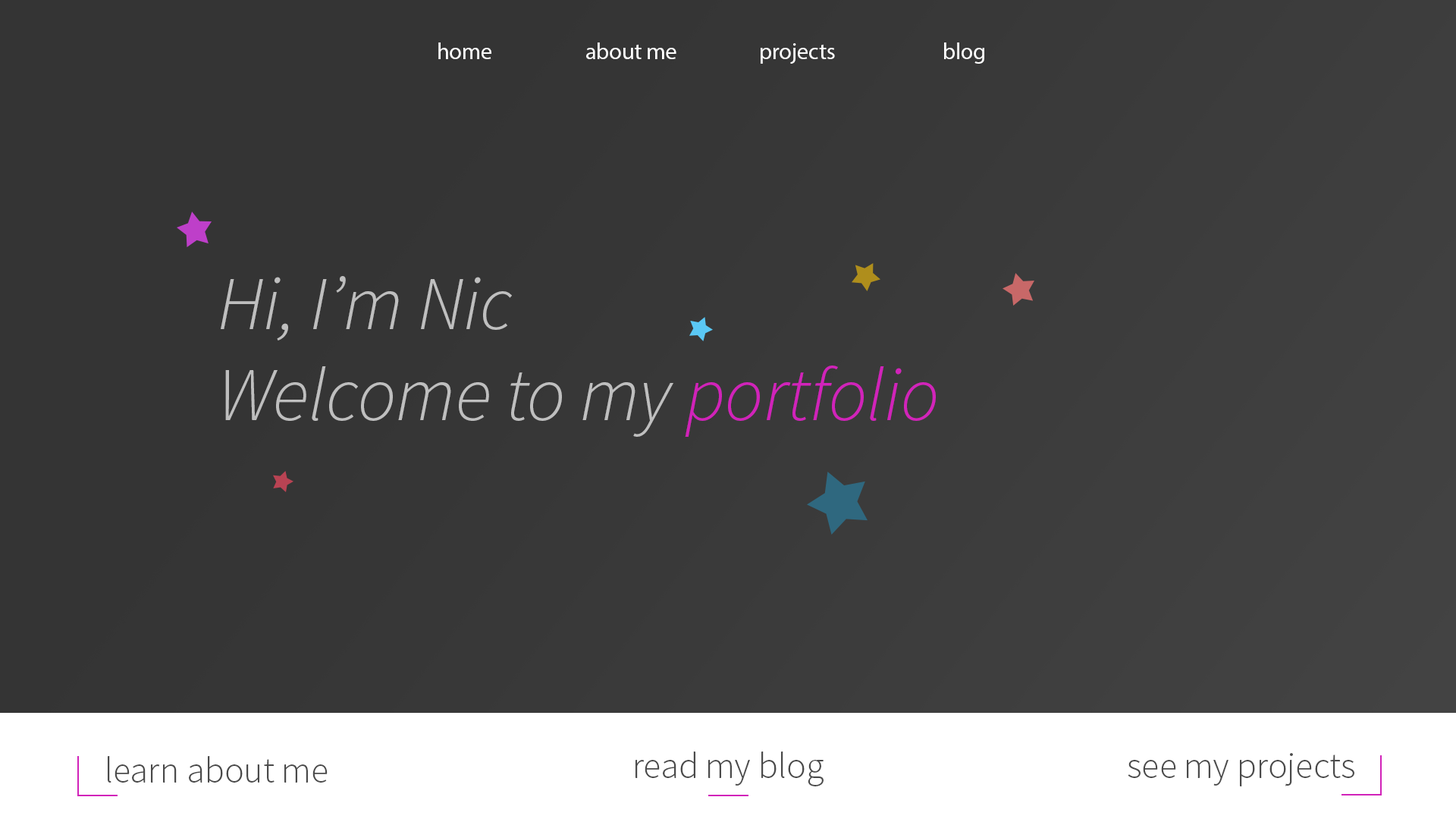
<style>
.page{position:relative;width:1456px;height:819px}
.page>*{position:absolute;margin:0}
.t1{font:22.7px "MyriadPro-Regular";color:#ffffff}
.t2{font:75.8px/91px "SourceSansPro-LightIt";color:#bfbfbf}
.t3{font:36.4px "SourceSansPro-Light";color:#4a4a4a}
</style>
<div class="page">
<p class="t1" style="left:438px;top:42px;width:53px;height:17px">home</p>
<p class="t1" style="left:586px;top:42px;width:90px;height:17px">about me</p>
<p class="t1" style="left:761px;top:43px;width:74px;height:21px">projects</p>
<p class="t1" style="left:944px;top:42px;width:40px;height:22px">blog</p>
<p class="t2" style="left:221px;top:276px;width:715px;height:161px">Hi, I’m Nic<br>Welcome to my portfolio</p>
<p class="t3" style="left:108px;top:756px;width:220px;height:27px">learn about me</p>
<p class="t3" style="left:635px;top:751px;width:189px;height:35px">read my blog</p>
<p class="t3" style="left:1128px;top:753px;width:226px;height:33px">see my projects</p>
</div>
